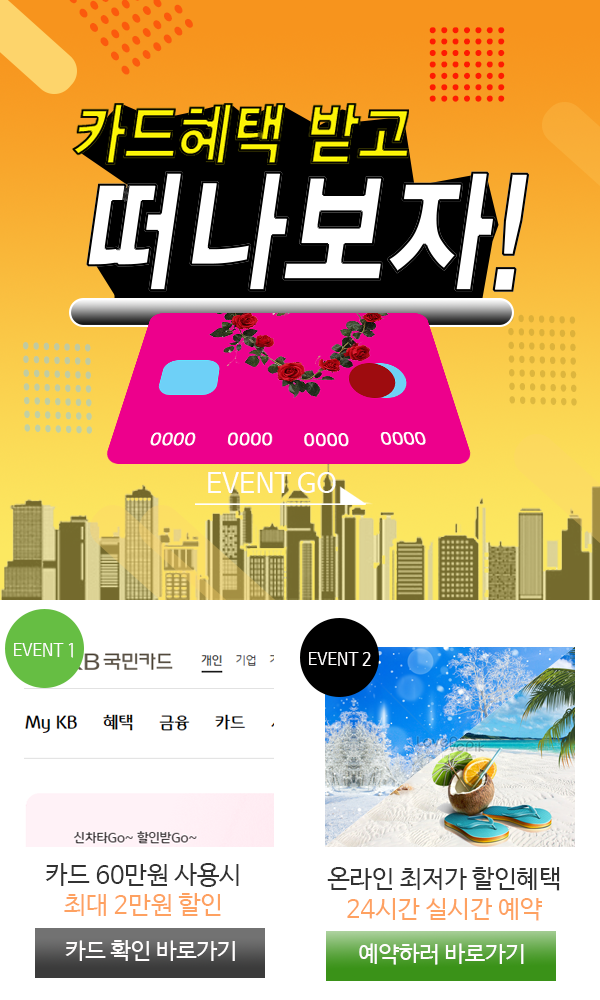
<style>
.page{position:relative;width:600px;height:1000px;background:#ffffff}
.page>*{position:absolute;margin:0}
.t1{font:79.7px "GulimChe";color:#fe1b02}
.t2{font:95.3px "GulimChe";color:#ddb43c;scale:0.75 1}
.t3{font:95.8px "GulimChe";color:#c1cda1;scale:0.75 1}
.t4{font:27.1px "NanumBarunGothic";color:#fffdfd}
.t5{font:18.2px "NanumBarunGothic";color:#fffdfd;scale:0.88 1}
.t6{font:25px "NanumBarunGothic";color:#323232}
.t7{font:25px "NanumBarunGothic";color:#fea161}
.t8{font:22.2px "NanumBarunGothic";color:#fffdfd}
</style>
<div class="page">
<p class="t1" style="left:429px;top:27px;width:76px;height:75px">▒</p>
<p class="t2" style="left:508px;top:314px;width:69px;height:92px;rotate:2deg">▒</p>
<p class="t3" style="left:23px;top:342px;width:69px;height:92px;rotate:2deg">▒</p>
<p class="t4" style="left:208px;top:472px;width:128px;height:21px">EVENT GO</p>
<p class="t5" style="left:14px;top:643px;width:59px;height:15px">EVENT 1</p>
<p class="t5" style="left:309px;top:652px;width:62px;height:14px">EVENT 2</p>
<p class="t6" style="left:45px;top:863px;width:194px;height:53px;text-align:center">카드 60만원 사용시<br><span class="t7">최대 2만원 할인</span></p>
<p class="t6" style="left:327px;top:867px;width:233px;height:54px;text-align:center">온라인 최저가 할인혜택<br><span class="t7">24시간 실시간 예약</span></p>
<p class="t8" style="left:65px;top:940px;width:170px;height:21px">카드 확인 바로가기</p>
<p class="t8" style="left:359px;top:943px;width:165px;height:22px">예약하러 바로가기</p>
</div>
